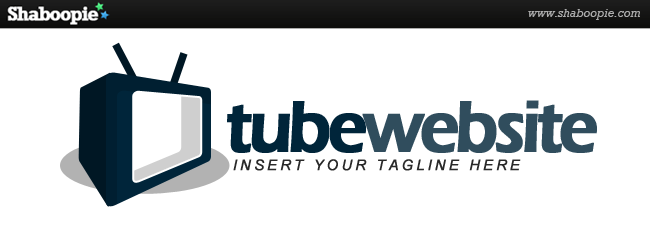
<style>
.page{position:relative;width:650px;height:250px;background:#ffffff}
.page>*{position:absolute;margin:0}
.t1{font:75px "ErasITC-Demi";letter-spacing:-0.075em;color:#304d5d;font-weight:bold;scale:0.92 1}
.t2{font:75px "ErasITC-Demi";letter-spacing:-0.075em;color:#00253a;font-weight:bold;scale:0.92 1}
.t3{font:14.6px "Arial-ItalicMT";letter-spacing:0.2em;color:#292929;font-weight:bold}
</style>
<div class="page">
<p class="t1" style="left:227px;top:100px;width:370px;height:53px"><span class="t2">tube</span>website</p>
<p class="t3" style="left:233px;top:159px;width:288px;height:12px">INSERT YOUR TAGLINE HERE</p>
</div>
